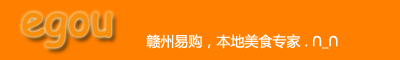
<style>
.page{position:relative;width:400px;height:60px;background:#ff8000}
.page>*{position:absolute;margin:0}
.t1{font:43.3px "ComicSansMS";color:#f7900b}
.t2{font:14px "MicrosoftYaHei";color:#ffffff}
</style>
<div class="page">
<p class="t1" style="left:22px;top:12px;width:90px;height:36px">egou</p>
<p class="t2" style="left:146px;top:34px;width:192px;height:15px">赣州易购，本地美食专家 . ∩_∩</p>
</div>
